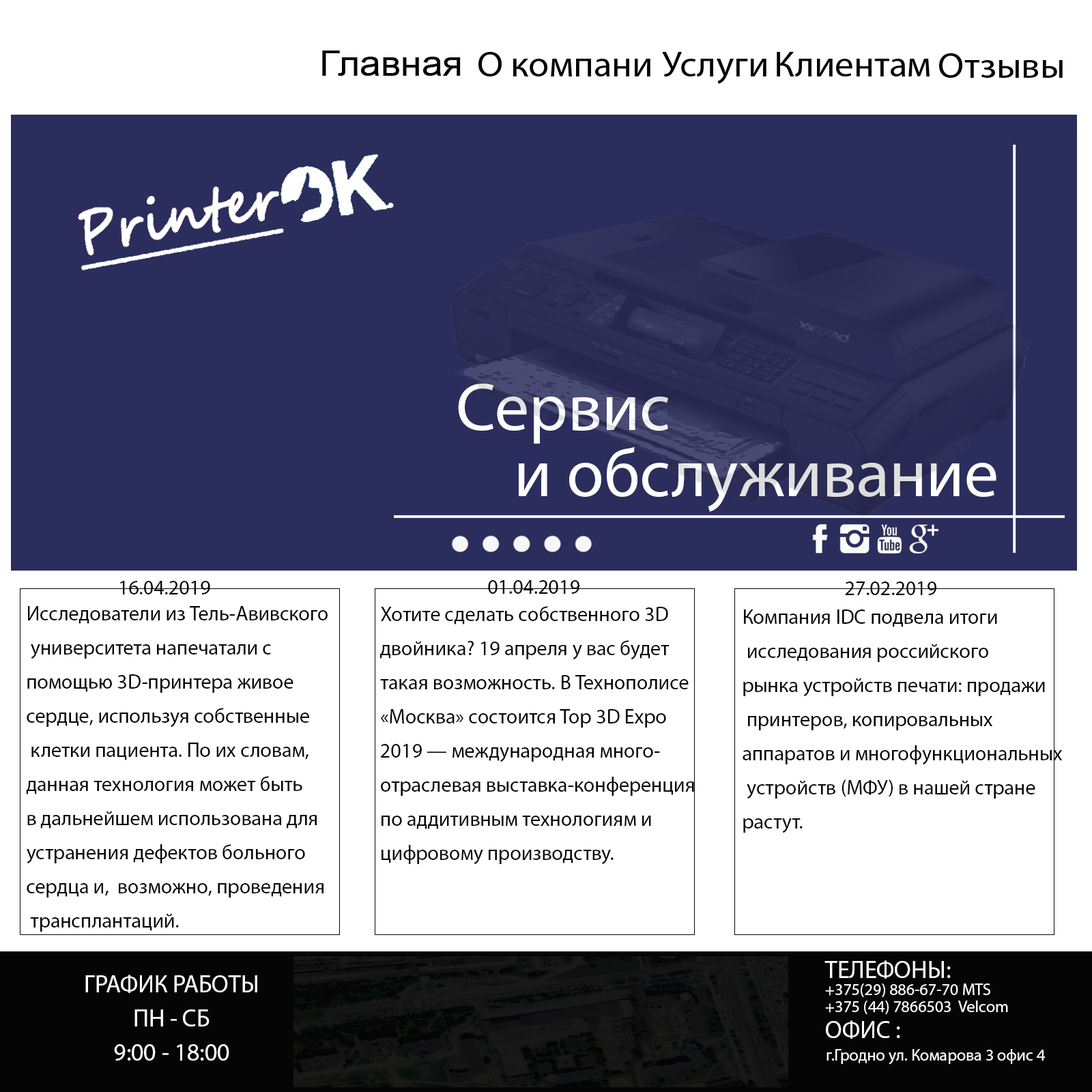
<style>
.page{position:relative;width:1092px;height:1092px;background:#ffffff}
.page>*{position:absolute;margin:0}
.t1{font:68.2px/16.7px "MyriadPro-Regular";color:#ffffff}
.t2{font:20.5px "MyriadPro-Regular";color:#040404}
.t3{font:20.5px/17.1px "MyriadPro-Regular";color:#040404}
.t4{font:16.4px/17.1px "MyriadPro-Regular";color:#ffffff}
.t5{font:24.6px/17.1px "MyriadPro-Regular";color:#ffffff}
.t6{font:24.6px "MyriadPro-Regular";color:#ffffff}
.t7{font:16.4px "MyriadPro-Regular";color:#ffffff}
</style>
<div class="page">
<p class="t1" style="left:458px;top:384px;width:538px;height:128px">Сервис <br> <br><br><br>          и обслуживание</p>
<p class="t2" style="left:120px;top:581px;width:90px;height:13px">16.04.2019</p>
<p class="t2" style="left:488px;top:580px;width:91px;height:14px">01.04.2019</p>
<p class="t2" style="left:845px;top:581px;width:91px;height:14px">27.02.2019</p>
<p class="t3" style="left:26px;top:606px;width:302px;height:326px">Исследователи из Тель-Авивского<br><br> университета напечатали с <br><br>помощью 3D-принтера живое <br><br>сердце, используя собственные<br><br> клетки пациента. По их словам, <br><br>данная технология может быть <br><br>в дальнейшем использована для <br><br>устранения дефектов больного <br><br>сердца и,  возможно, проведения<br><br> трансплантаций.</p>
<p class="t3" style="left:380px;top:606px;width:314px;height:259px">Хотите сделать собственного 3D<br> <br>двойника? 19 апреля у вас будет <br><br>такая возможность. В Технополисе<br> <br>«Москва» состоится Top 3D Expo <br><br>2019 — международная много-<br><br>отраслевая выставка-конференция <br><br>по аддитивным технологиям и <br><br>цифровому производству.</p>
<p class="t3" style="left:743px;top:609px;width:320px;height:224px">Компания IDC подвела итоги<br><br> исследования российского <br><br>рынка устройств печати: продажи<br><br> принтеров, копировальных <br><br>аппаратов и многофункциональных<br><br> устройств (МФУ) в нашей стране <br><br>растут.</p>
<p class="t4" style="left:824px;top:960px;width:184px;height:54px"><span class="t5">ТЕЛЕФОНЫ:<br></span>+375(29) 886-67-70 MTS<br>+375 (44) 7866503  Velcom</p>
<p class="t5" style="left:85px;top:975px;width:172px;height:86px;text-align:center">ГРАФИК РАБОТЫ<br><br>ПН - СБ<br><br>9:00 - 18:00</p>
<p class="t6" style="left:826px;top:1020px;width:74px;height:19px">ОФИС :</p>
<p class="t7" style="left:826px;top:1049px;width:220px;height:16px">г.Гродно ул. Комарова 3 офис 4</p>
</div>
